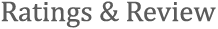
<style>
.page{position:relative;width:218px;height:29px;background:#ffffff}
.page>*{position:absolute;margin:0}
.t1{font:28.8px "Cambria";color:#5b5b5b}
</style>
<div class="page">
<p class="t1" style="left:1px;top:1px;width:215px;height:27px">Ratings &amp; Review</p>
</div>
